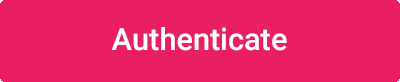
<style>
.page{position:relative;width:400px;height:82px;background:#e91e63}
.page>*{position:absolute;margin:0}
.t1{font:30.7px "Roboto-Medium";color:#ffffff}
</style>
<div class="page">
<p class="t1" style="left:111px;top:27px;width:176px;height:24px">Authenticate</p>
<p class="t1" style="left:111px;top:27px;width:176px;height:24px">Authenticate</p>
</div>
